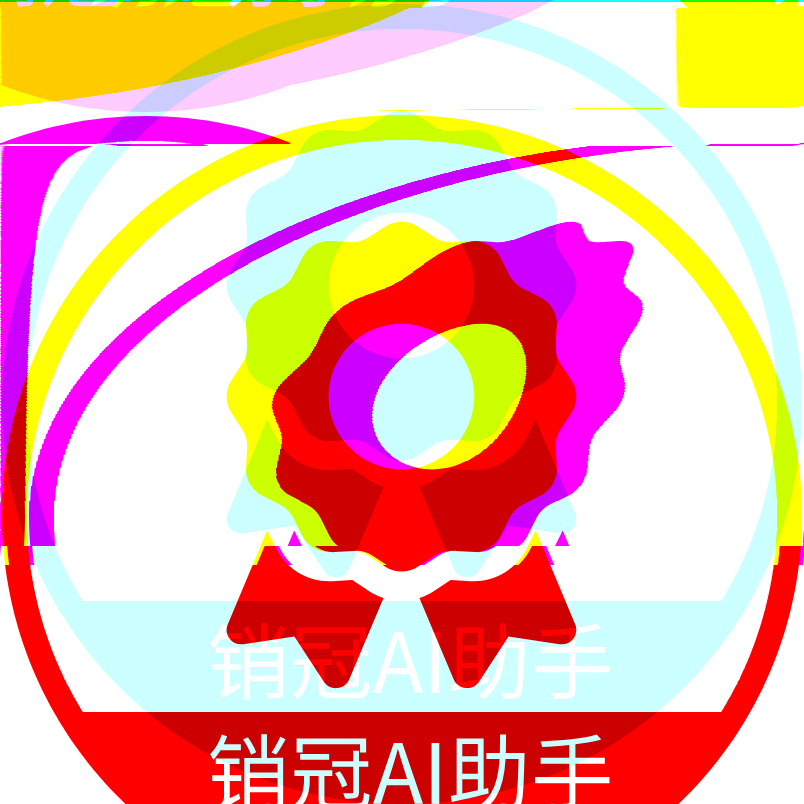
<style>
.page{position:relative;width:804px;height:804px;background:#ffffff}
.page>*{position:absolute;margin:0}
.t1{font:83.1px "MicrosoftYaHei"}
</style>
<div class="page">
<p class="t1" style="left:210px;top:621px;width:400px;height:77px">销冠AI助手</p>
</div>
